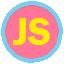
<style>
.page{position:relative;width:64px;height:64px;background:#ff7598}
.page>*{position:absolute;margin:0}
.t1{font:40.1px "FranklinGothic-Demi";color:#ffee00}
</style>
<div class="page">
<p class="t1" style="left:13px;top:18px;width:37px;height:27px">JS</p>
</div>
